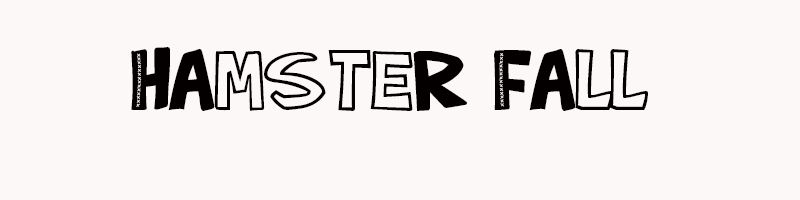
<style>
.page{position:relative;width:800px;height:200px;background:#fcf8f8}
.page>*{position:absolute;margin:0}
.t1{font:85px "QUEFONTita!-Black";color:#050000}
</style>
<div class="page">
<p class="t1" style="left:131px;top:47px;width:517px;height:64px">hamster fall</p>
</div>
